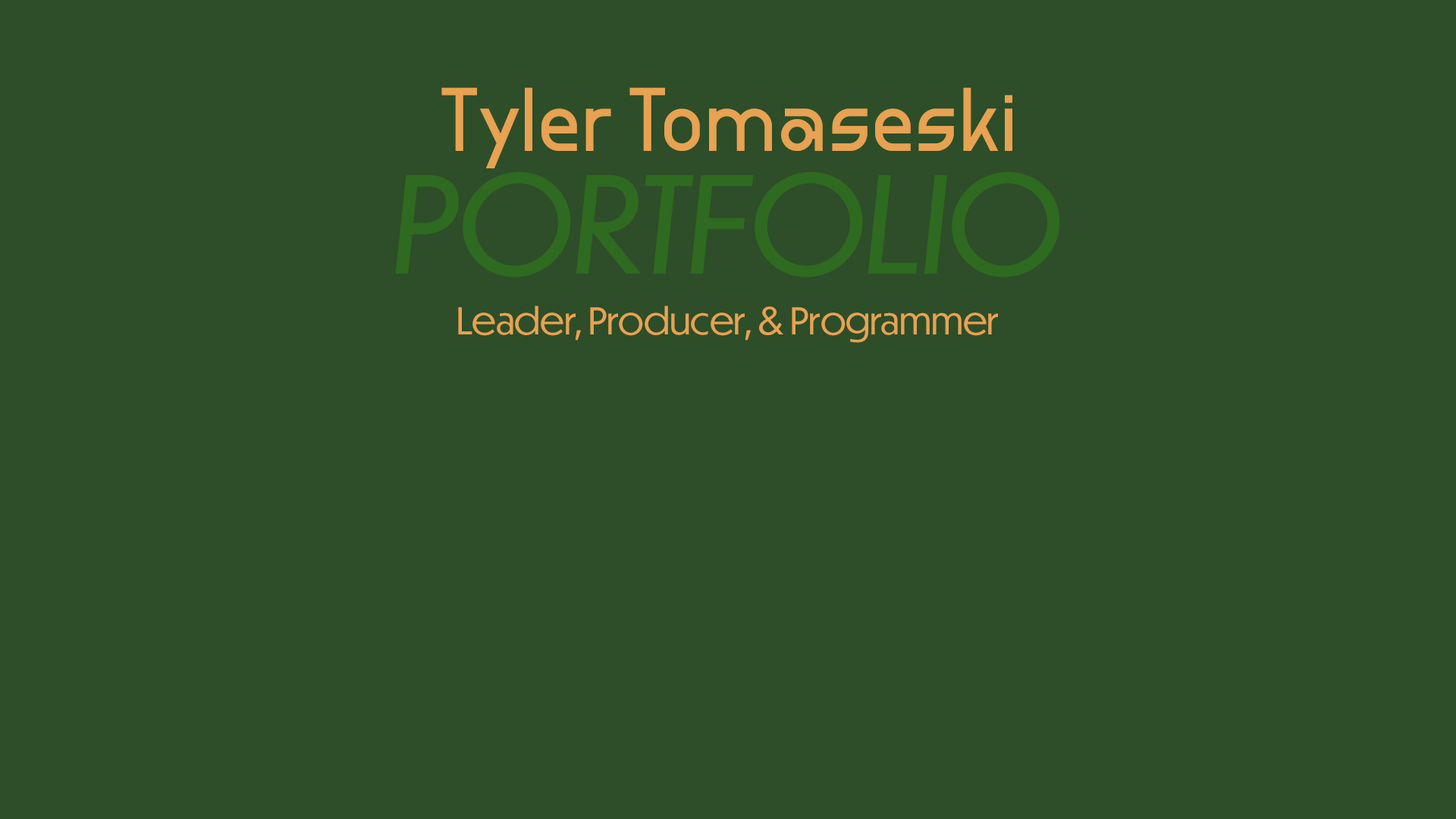
<style>
.page{position:relative;width:1456px;height:819px;background:#2d4e29}
.page>*{position:absolute;margin:0}
.t1{font:87.2px "Format_1452";color:#e7a252}
.t2{font:132px "DunbarTall-BookItalic";color:#2e6a20}
.t3{font:36.4px "DunbarTall-Book";color:#e7a252}
</style>
<div class="page">
<p class="t1" style="left:441px;top:87px;width:571px;height:81px">Tyler Tomaseski</p>
<p class="t2" style="left:395px;top:171px;width:665px;height:107px">PORTFOLIO</p>
<p class="t3" style="left:458px;top:306px;width:540px;height:37px">Leader, Producer, &amp; Programmer</p>
</div>
